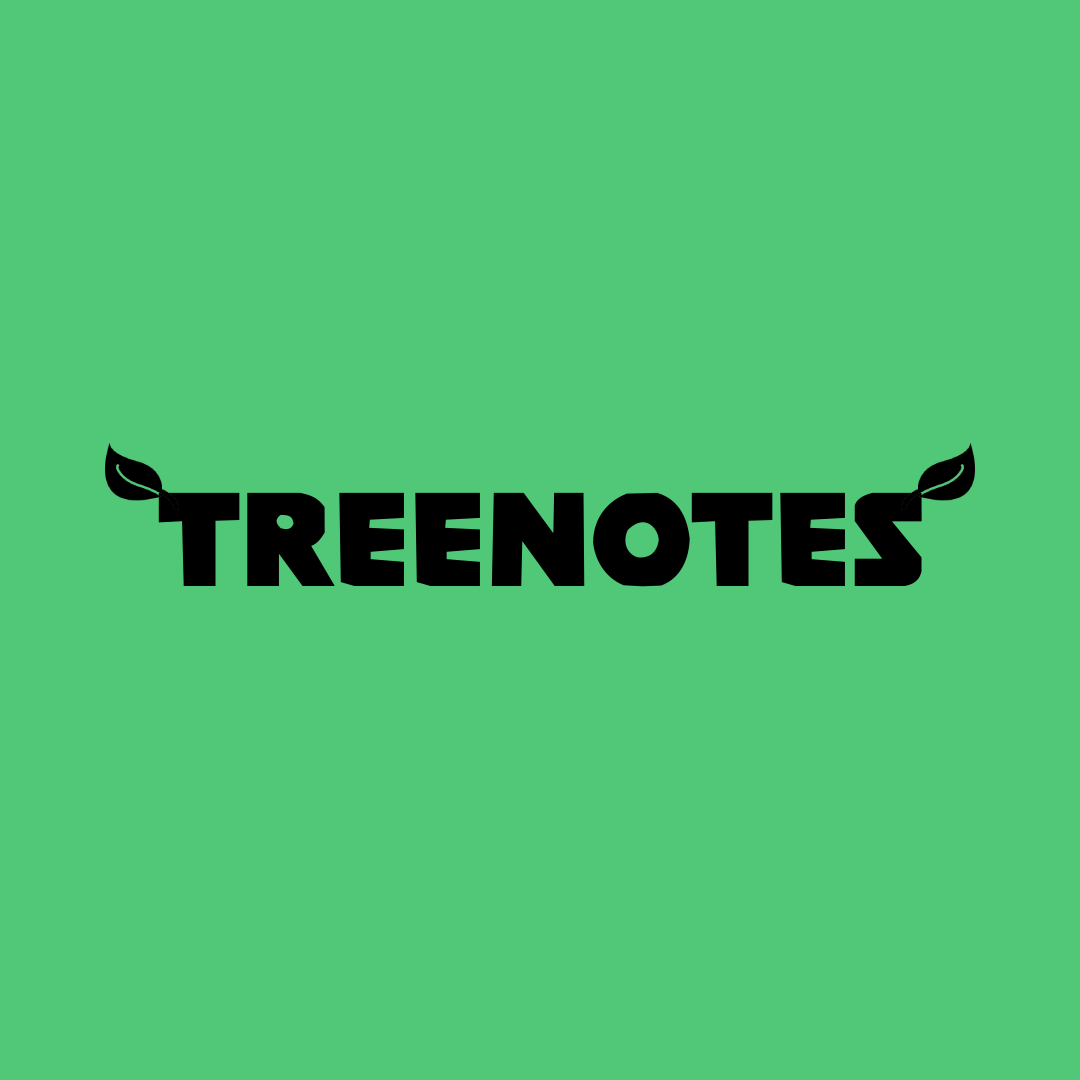
<style>
.page{position:relative;width:1080px;height:1080px;background:#50c878}
.page>*{position:absolute;margin:0}
.t1{font:150px "PolenoSemiBold";color:#000000}
</style>
<div class="page">
<p class="t1" style="left:158px;top:492px;width:764px;height:95px">TREENOTES</p>
</div>
